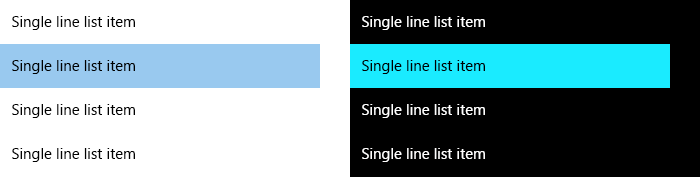
<style>
.page{position:relative;width:700px;height:177px;background:#000000}
.page>*{position:absolute;margin:0}
.t1{font:15px "SegoeUI";color:#000000}
.t2{font:15px "SegoeUI";color:#ffffff}
.t3{font:15px "SegoeUI";color:#fffefe}
</style>
<div class="page">
<p class="t1" style="left:12px;top:16px;width:123px;height:14px">Single line list item</p>
<p class="t2" style="left:362px;top:16px;width:123px;height:14px">Single line list item</p>
<p class="t1" style="left:12px;top:60px;width:123px;height:14px">Single line list item</p>
<p class="t1" style="left:362px;top:60px;width:123px;height:14px">Single line list item</p>
<p class="t1" style="left:12px;top:104px;width:123px;height:14px">Single line list item</p>
<p class="t2" style="left:362px;top:104px;width:123px;height:14px">Single line list item</p>
<p class="t1" style="left:12px;top:148px;width:123px;height:14px">Single line list item</p>
<p class="t3" style="left:362px;top:148px;width:123px;height:14px">Single line list item</p>
</div>
